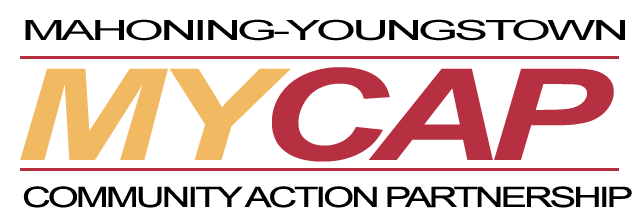
<style>
.page{position:relative;width:640px;height:222px;background:#ffffff}
.page>*{position:absolute;margin:0}
.t1{font:28px "ArialMT";letter-spacing:-0.08em;color:#000000;scale:1.84 1}
.t2{font:127.4px "Arial-BoldItalicMT";letter-spacing:-0.08em;color:#b73041;scale:1.42 1}
.t3{font:127.4px "Arial-BoldItalicMT";letter-spacing:-0.08em;color:#f1b962;scale:1.42 1}
.t4{font:28.2px "ArialMT";letter-spacing:-0.08em;color:#000000;scale:1.42 1}
</style>
<div class="page">
<p class="t1" style="left:25px;top:19px;width:600px;height:22px">MAHONING-YOUNGSTOWN</p>
<p class="t2" style="left:20px;top:67px;width:594px;height:95px"><span class="t3">MY</span>CAP</p>
<p class="t4" style="left:23px;top:186px;width:609px;height:22px">COMMUNITY ACTION PARTNERSHIP</p>
</div>
